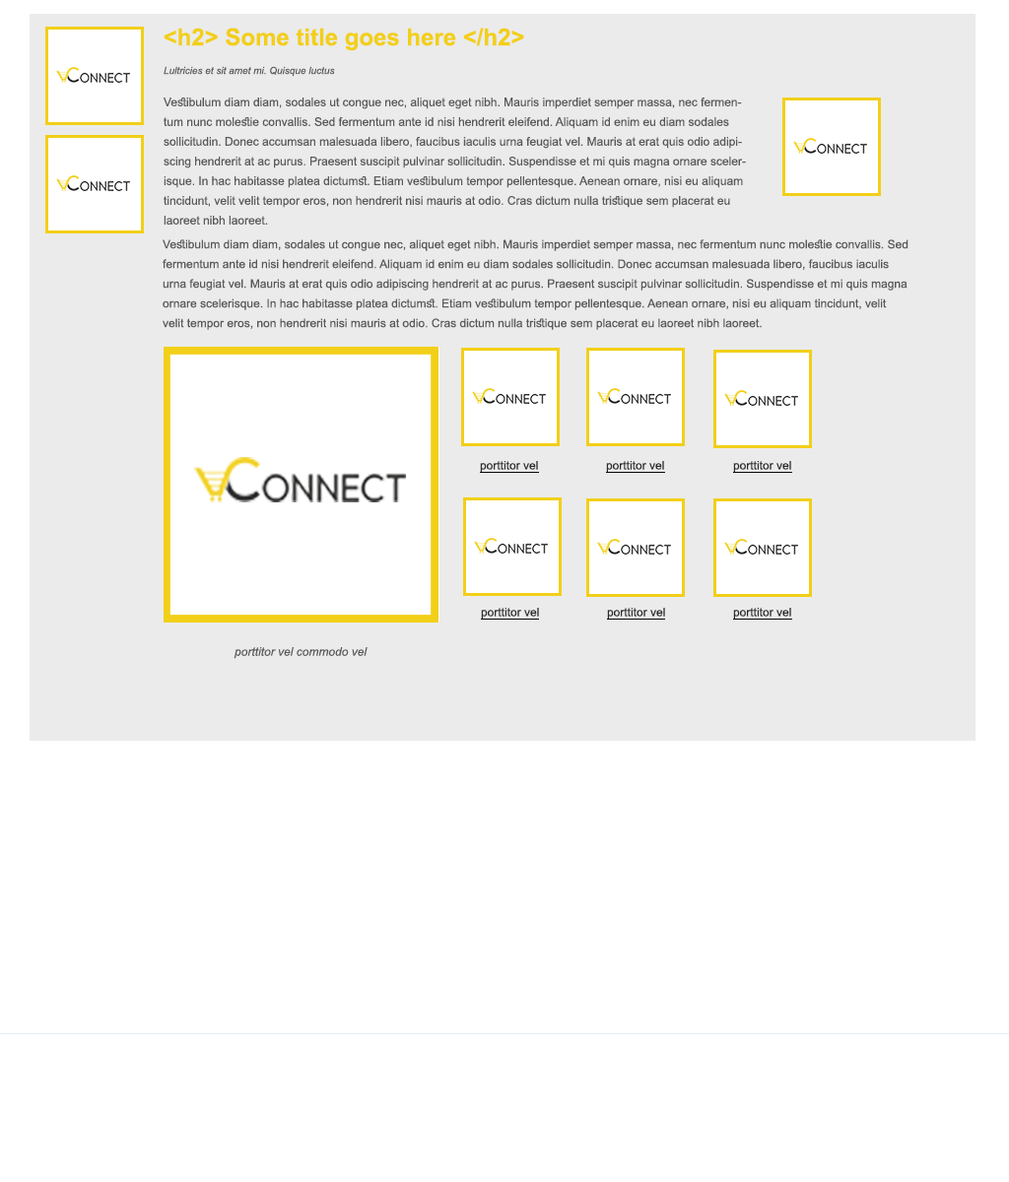
<style>
.page{position:relative;width:1009px;height:1182px;background:#ffffff}
.page>*{position:absolute;margin:0}
.t1{font:23.6px "Arial-BoldMT";color:#f2cf19}
.t2{font:9.9px "Arial-ItalicMT";color:#595959}
.t3{font:11.8px/19.7px "ArialMT";color:#595959}
.t4{font:11.8px "ArialMT";color:#2b2b2b}
.t5{font:11.8px "Arial-ItalicMT";color:#595959}
</style>
<div class="page">
<p class="t1" style="left:164px;top:28px;width:360px;height:23px">&lt;h2&gt; Some title goes here &lt;/h2&gt;</p>
<p class="t2" style="left:164px;top:66px;width:171px;height:11px">Lultricies et sit amet mi. Quisque luctus</p>
<p class="t3" style="left:164px;top:98px;width:582px;height:127px">Vestibulum diam diam, sodales ut congue nec, aliquet eget nibh. Mauris imperdiet semper massa, nec fermentum nunc molestie convallis. Sed fermentum ante id nisi hendrerit eleifend. Aliquam id enim eu diam sodales sollicitudin. Donec accumsan malesuada libero, faucibus iaculis urna feugiat vel. Mauris at erat quis odio adipiscing hendrerit at ac purus. Praesent suscipit pulvinar sollicitudin. Suspendisse et mi quis magna ornare scelerisque. In hac habitasse platea dictumst. Etiam vestibulum tempor pellentesque. Aenean ornare, nisi eu aliquam tincidunt, velit velit tempor eros, non hendrerit nisi mauris at odio. Cras dictum nulla tristique sem placerat eu laoreet nibh laoreet.</p>
<p class="t3" style="left:163px;top:239px;width:745px;height:91px">Vestibulum diam diam, sodales ut congue nec, aliquet eget nibh. Mauris imperdiet semper massa, nec fermentum nunc molestie convallis. Sed fermentum ante id nisi hendrerit eleifend. Aliquam id enim eu diam sodales sollicitudin. Donec accumsan malesuada libero, faucibus iaculis urna feugiat vel. Mauris at erat quis odio adipiscing hendrerit at ac purus. Praesent suscipit pulvinar sollicitudin. Suspendisse et mi quis magna ornare scelerisque. In hac habitasse platea dictumst. Etiam vestibulum tempor pellentesque. Aenean ornare, nisi eu aliquam tincidunt, velit velit tempor eros, non hendrerit nisi mauris at odio. Cras dictum nulla tristique sem placerat eu laoreet nibh laoreet.</p>
<p class="t4" style="left:480px;top:461px;width:58px;height:11px">porttitor vel</p>
<p class="t4" style="left:606px;top:461px;width:58px;height:11px">porttitor vel</p>
<p class="t4" style="left:733px;top:461px;width:58px;height:11px">porttitor vel</p>
<p class="t4" style="left:481px;top:608px;width:58px;height:11px">porttitor vel</p>
<p class="t4" style="left:607px;top:608px;width:58px;height:11px">porttitor vel</p>
<p class="t4" style="left:733px;top:608px;width:58px;height:11px">porttitor vel</p>
<p class="t5" style="left:233px;top:647px;width:134px;height:12px">porttitor vel commodo vel</p>
</div>
